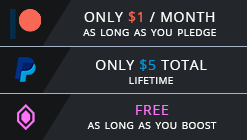
<style>
.page{position:relative;width:247px;height:140px;background:#23262a}
.page>*{position:absolute;margin:0}
.t1{font:14px/14px "OpenSans-Regular";letter-spacing:0.054em;color:#ffffff;font-variant:small-caps}
.t2{font:14px/14px "OpenSans-Regular";letter-spacing:0.054em;color:#f96854;font-variant:small-caps}
.t3{font:14px/14px "OpenSans-Regular";letter-spacing:0.054em;color:#0098db;font-variant:small-caps}
.t4{font:14px/14px "OpenSans-Regular";letter-spacing:0.054em;color:#ff73fa;font-variant:small-caps}
</style>
<div class="page">
<p class="t1" style="left:83px;top:11px;width:133px;height:25px;text-align:center">ONLY <span class="t2">$1</span> / MONTH<br>as long as you pledge</p>
<p class="t1" style="left:96px;top:59px;width:111px;height:25px;text-align:center">ONLY <span class="t3">$5</span> TOTAL<br>lifetime</p>
<p class="t1" style="left:87px;top:105px;width:130px;height:24px;text-align:center"><span class="t4">FREE<br></span>as long as you boost</p>
</div>
